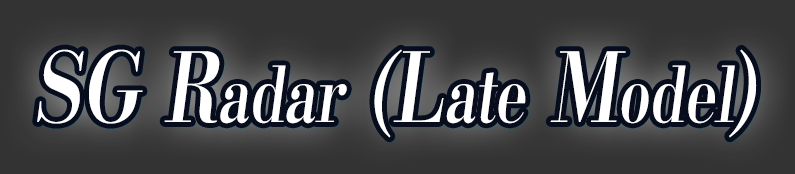
<style>
.page{position:relative;width:795px;height:174px;background:#333333}
.page>*{position:absolute;margin:0}
.t1{font:96px "KochoStd-Heavy";color:#ffffff;font-style:italic;scale:0.75 1}
.t2{font:76.8px "KochoStd-Heavy";color:#ffffff;font-style:italic;scale:0.75 1}
</style>
<div class="page">
<p class="t1" style="left:37px;top:49px;width:720px;height:89px">SG R<span class="t2">adar</span> (L<span class="t2">ate</span> M<span class="t2">odel</span>)</p>
</div>
